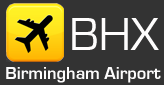
<style>
.page{position:relative;width:164px;height:85px;background:#333333}
.page>*{position:absolute;margin:0}
.t1{font:48px "EurostileRegular";color:#fefdfd}
.t2{font:18px "EurostileBold";color:#fdfcfc}
</style>
<div class="page">
<p class="t1" style="left:72px;top:18px;width:87px;height:32px">BHX</p>
<p class="t2" style="left:6px;top:67px;width:155px;height:16px">Birmingham Airport</p>
</div>
